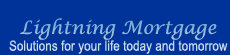
<style>
.page{position:relative;width:230px;height:55px;background:#003399}
.page>*{position:absolute;margin:0}
.t1{font:14px "ArialNarrow";letter-spacing:0.01em}
.t2{font:18px "LucidaCalligraphy-Italic";letter-spacing:0.01em}
</style>
<div class="page">
<p class="t1" style="left:9px;top:18px;width:219px;height:36px;text-align:center"><span class="t2">Lightning Mortgage<br></span>Solutions for your life today and tomorrow</p>
</div>
